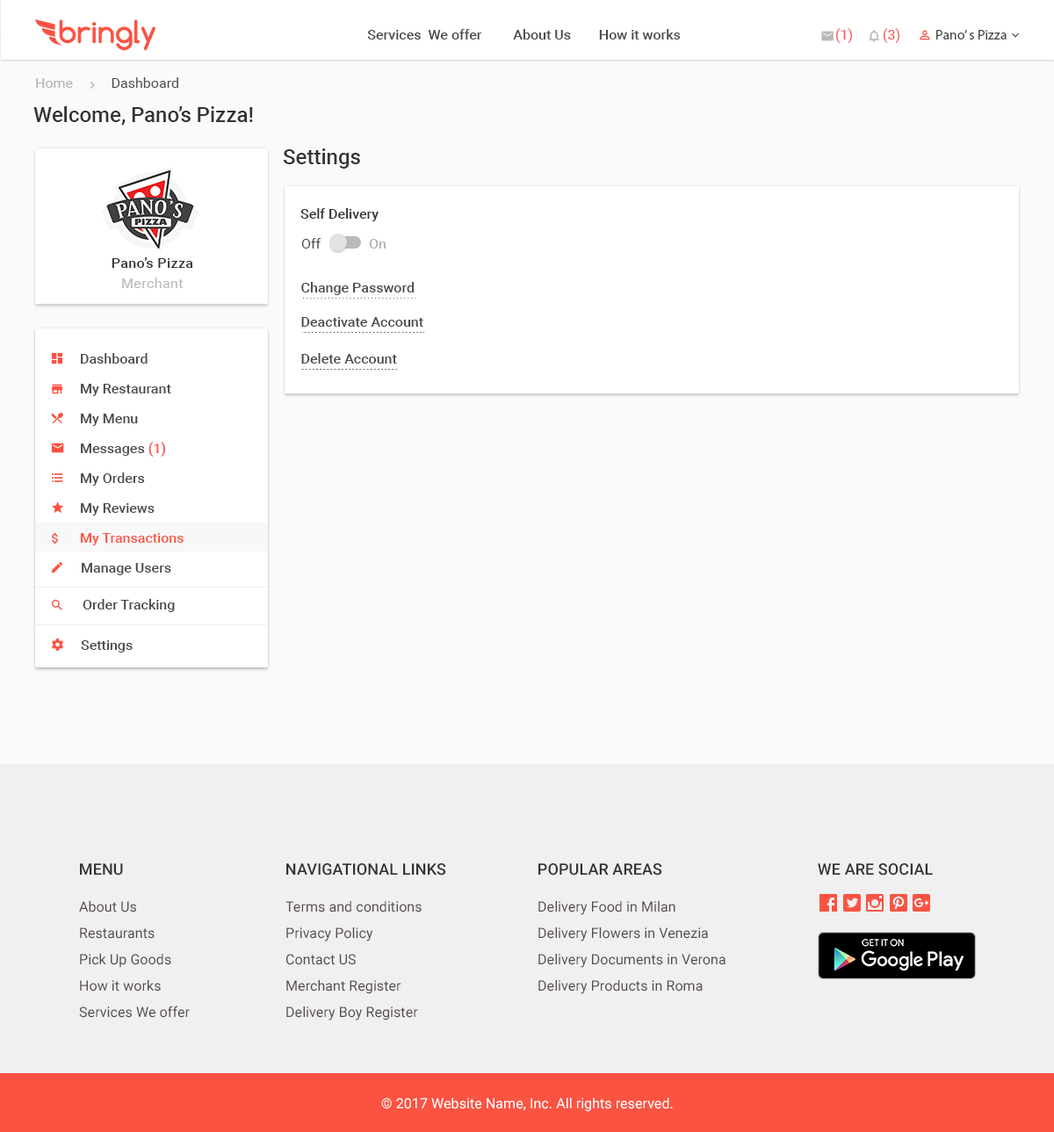
<style>
.page{position:relative;width:1054px;height:1132px;background:#fafafa}
.page>*{position:absolute;margin:0}
.t1{font:14px "Roboto-Medium";color:#4a4a4a}
.t2{font:14px "Roboto-Regular";color:#fa5342}
.t3{font:14px "MyriadPro-Regular";color:#4a4a4a}
.t4{font:14px "Roboto-Regular";color:#4a4a4a}
.t5{font:14px "Roboto-Regular";color:#b0b0b0}
.t6{font:21.1px "Roboto-Medium";color:#333333}
.t7{font:14px "Roboto-Medium";color:#333333}
.t8{font:14px "Roboto-Medium";color:#b5b5b5}
.t9{font:14px "Roboto-Medium";letter-spacing:0.025em;color:#333333}
.t10{font:14px "Roboto-Regular";letter-spacing:0.025em;color:#b8b8b8}
.t11{font:14px/29.9px "Roboto-Medium";color:#4a4a4a}
.t12{font:14px/29.9px "Roboto-Medium";color:#fa5342}
.t13{font:15.8px "Roboto-Medium";letter-spacing:0.005em;color:#333333}
.t14{font:15.8px "Roboto-Medium";letter-spacing:0.005em;color:#333333;text-transform:uppercase}
.t15{font:14px/26.3px "Roboto-Regular";letter-spacing:0.005em;color:#554c4a}
.t16{font:14px "Roboto-Regular";letter-spacing:0.005em;color:#ffffff}
</style>
<div class="page">
<p class="t1" style="left:367px;top:29px;width:313px;height:11px">Services  We offer         About Us        How it works</p>
<p class="t2" style="left:835px;top:28px;width:17px;height:15px">(1)</p>
<p class="t2" style="left:882px;top:28px;width:17px;height:15px">(3)</p>
<p class="t3" style="left:936px;top:30px;width:70px;height:10px">Pano’ s Pizza</p>
<p class="t4" style="left:36px;top:77px;width:142px;height:11px"><span class="t5">Home           </span>Dashboard</p>
<p class="t6" style="left:33px;top:106px;width:220px;height:20px">Welcome, Pano’s Pizza!</p>
<p class="t6" style="left:283px;top:148px;width:77px;height:21px">Settings</p>
<p class="t7" style="left:300px;top:208px;width:78px;height:13px">Self Delivery</p>
<p class="t4" style="left:301px;top:238px;width:20px;height:10px">Off</p>
<p class="t8" style="left:369px;top:239px;width:17px;height:9px">On</p>
<p class="t9" style="left:112px;top:257px;width:81px;height:11px">Pano’s Pizza</p>
<p class="t10" style="left:122px;top:277px;width:61px;height:11px">Merchant</p>
<p class="t1" style="left:301px;top:282px;width:113px;height:13px">Change Password</p>
<p class="t1" style="left:301px;top:317px;width:122px;height:10px">Deactivate Account</p>
<p class="t11" style="left:81px;top:353px;width:103px;height:192px">Dashboard<br>My Restaurant<br>My Menu<br>Messages <span class="t12">(1)<br></span>My Orders<br>My Reviews<br><span class="t12">My Transactions</span></p>
<p class="t1" style="left:301px;top:353px;width:96px;height:10px">Delete Account</p>
<p class="t1" style="left:82px;top:563px;width:89px;height:12px">Manage Users</p>
<p class="t1" style="left:83px;top:599px;width:92px;height:13px">Order Tracking</p>
<p class="t1" style="left:81px;top:640px;width:52px;height:12px">Settings</p>
<p class="t13" style="left:80px;top:863px;width:43px;height:12px">MENU</p>
<p class="t14" style="left:286px;top:863px;width:160px;height:12px">Navigational Links</p>
<p class="t14" style="left:538px;top:863px;width:124px;height:12px">Popular Areas</p>
<p class="t14" style="left:817px;top:863px;width:115px;height:12px">We are social</p>
<p class="t15" style="left:79px;top:901px;width:111px;height:117px">About Us<br>Restaurants<br>Pick Up Goods <br>How it works <br>Services We offer</p>
<p class="t15" style="left:285px;top:901px;width:136px;height:119px">Terms and conditions<br>Privacy Policy<br>Contact US <br>Merchant Register <br>Delivery Boy Register</p>
<p class="t15" style="left:538px;top:901px;width:187px;height:93px">Delivery Food in Milan<br>Delivery Flowers in Venezia<br>Delivery Documents in Verona<br>Delivery Products in Roma</p>
<p class="t16" style="left:381px;top:1098px;width:292px;height:14px">© 2017 Website Name, Inc. All rights reserved.</p>
</div>
